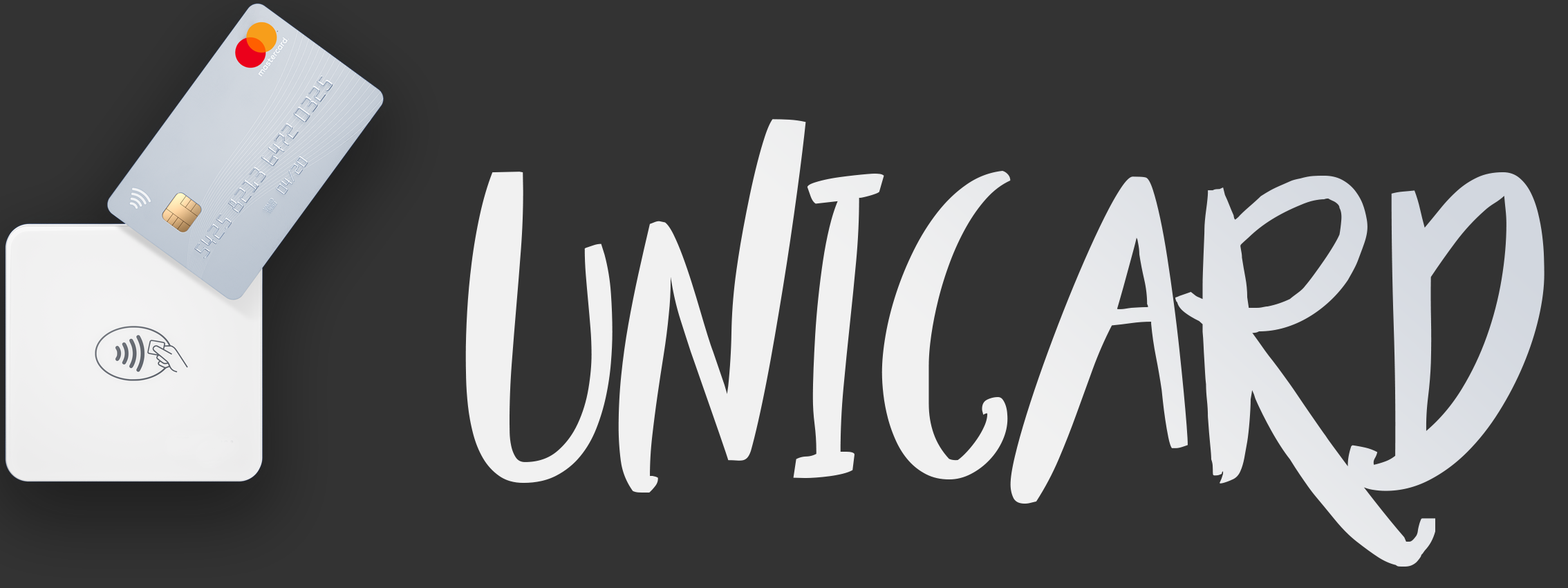
<style>
.page{position:relative;width:1568px;height:588px;background:#333333}
.page>*{position:absolute;margin:0}
.t1{font:309.7px "BeautyandtheBeast";letter-spacing:0.02em;color:#dbdce4;text-transform:uppercase}
</style>
<div class="page">
<p class="t1" style="left:465px;top:119px;width:1079px;height:447px">UniCard</p>
</div>
